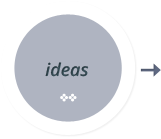
<style>
.page{position:relative;width:161px;height:139px;background:#ffffff}
.page>*{position:absolute;margin:0}
.t1{font:17.9px "OpenSans-SemiboldItalic";color:#31464e}
</style>
<div class="page">
<p class="t1" style="left:45px;top:62px;width:44px;height:15px">ideas</p>
</div>
